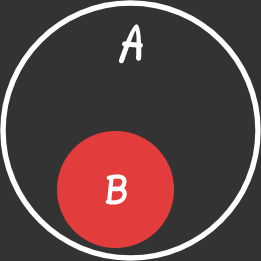
<style>
.page{position:relative;width:261px;height:261px;background:#333333}
.page>*{position:absolute;margin:0}
.t1{font:36px "Blokletters-Viltstift";color:#ffffff}
.t2{font:30px "Blokletters-Viltstift";color:#ffffff}
</style>
<div class="page">
<p class="t1" style="left:118px;top:24px;width:25px;height:40px">A</p>
<p class="t2" style="left:105px;top:174px;width:22px;height:31px">B</p>
</div>
